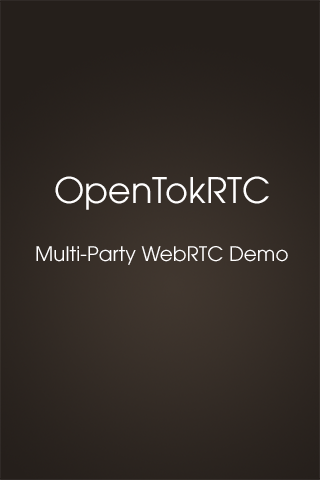
<style>
.page{position:relative;width:320px;height:480px}
.page>*{position:absolute;margin:0}
.t1{font:35px "AvantGarde-Book";color:#fffefe}
.t2{font:20px "AvantGarde-Book";color:#fffefe}
</style>
<div class="page">
<p class="t1" style="left:55px;top:176px;width:214px;height:34px">OpenTokRTC</p>
<p class="t2" style="left:36px;top:246px;width:252px;height:19px">Multi-Party WebRTC Demo</p>
</div>
